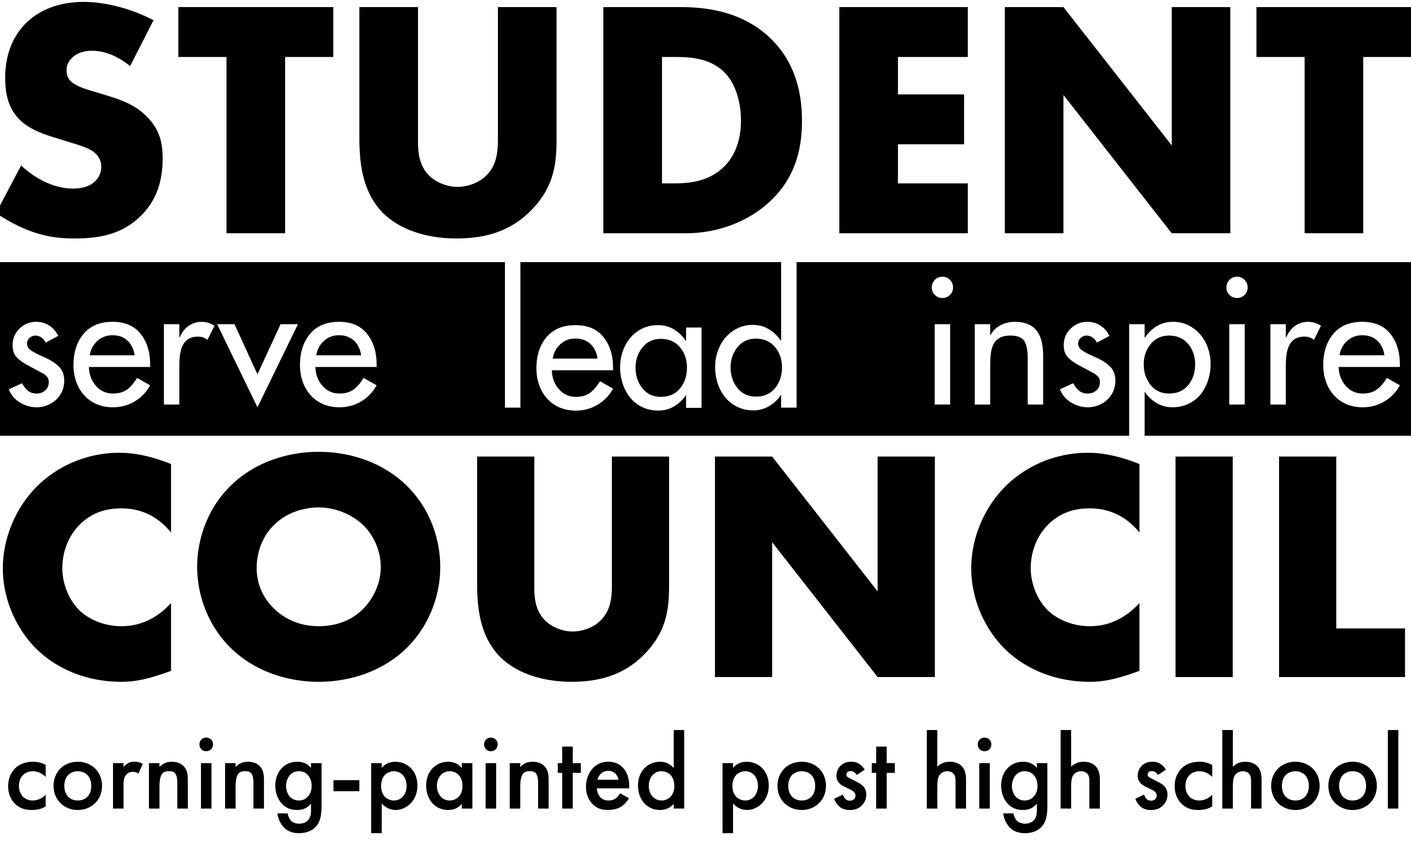
<style>
.page{position:relative;width:1411px;height:845px;background:#ffffff}
.page>*{position:absolute;margin:0}
.t1{font:171.5px "Futura-Medium";color:#ffffff}
.t2{font:330.7px "FuturaPT-Bold";color:#000000;text-transform:uppercase}
.t3{font:108px "FuturaPT-Medium";color:#000000}
</style>
<div class="page">
<p class="t1" style="left:505px;top:258px;width:292px;height:153px">lead</p>
<p class="t1" style="left:932px;top:276px;width:469px;height:175px">inspire</p>
<p class="t1" style="left:9px;top:322px;width:368px;height:85px">serve</p>
<p class="t2" style="left:3px;top:452px;width:1403px;height:230px">COUNCIL</p>
<p class="t3" style="left:8px;top:730px;width:1391px;height:103px">corning-painted post high school</p>
</div>
